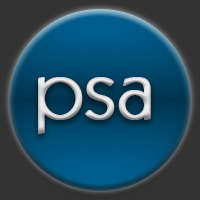
<style>
.page{position:relative;width:200px;height:200px;background:#333333}
.page>*{position:absolute;margin:0}
.t1{font:80px "KabelITCbyBT-Book";color:#e3e3e3;font-weight:bold}
</style>
<div class="page">
<p class="t1" style="left:38px;top:77px;width:113px;height:57px">psa</p>
</div>
